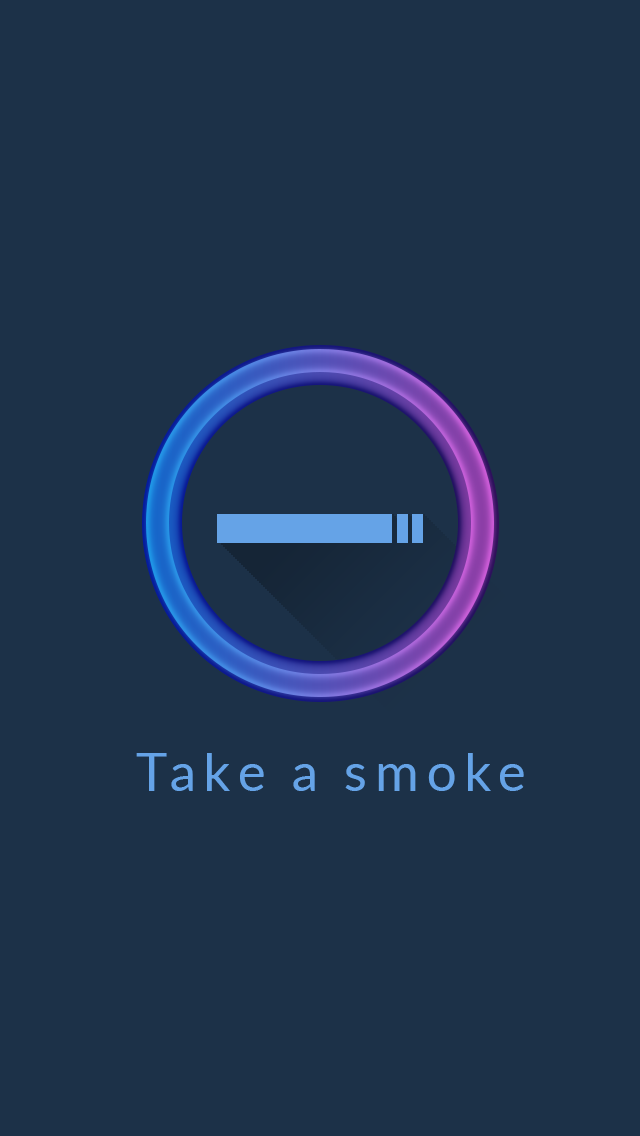
<style>
.page{position:relative;width:640px;height:1136px;background:#1c3148}
.page>*{position:absolute;margin:0}
.t1{font:53px "Lato-Regular";letter-spacing:0.15em;color:#65a3e7}
</style>
<div class="page">
<p class="t1" style="left:136px;top:753px;width:388px;height:38px">Take a smoke</p>
</div>
